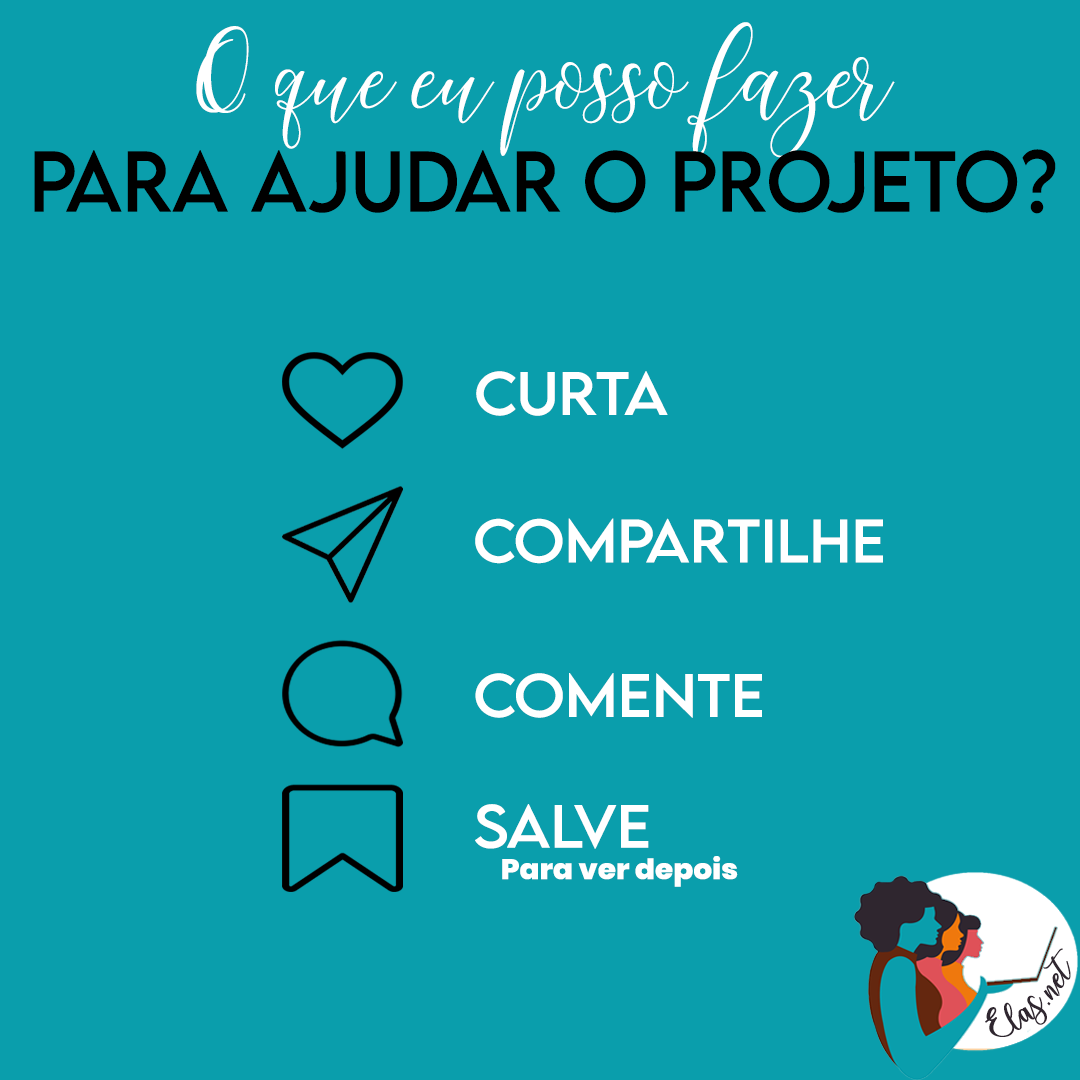
<style>
.page{position:relative;width:1080px;height:1080px;background:#0a9eac}
.page>*{position:absolute;margin:0}
.t1{font:76.3px "LEMONMILK-Regular";color:#000000;scale:0.97 1}
.t2{font:127.9px "MaheisaScript";color:#ffffff;scale:0.97 1}
.t3{font:54.3px "LEMONMILK-Regular";color:#ffffff;scale:1.06 1}
.t4{font:28px "Poppins-ExtraBold";color:#ffffff;scale:1.06 1}
.t5{font:25px "charlinda-Regular";color:#2f262f;scale:1.18 1}
</style>
<div class="page">
<p class="t1" style="left:34px;top:22px;width:1022px;height:192px;text-align:center"><span class="t2">O que eu posso fazer<br></span>Para ajudar o projeto?</p>
<p class="t3" style="left:476px;top:371px;width:192px;height:45px">Curta</p>
<p class="t3" style="left:475px;top:518px;width:408px;height:46px">Compartilhe</p>
<p class="t3" style="left:475px;top:673px;width:287px;height:45px">comente</p>
<p class="t3" style="left:475px;top:804px;width:174px;height:45px">Salve</p>
<p class="t4" style="left:502px;top:856px;width:236px;height:31px">Para ver depois</p>
<p class="t5" style="left:985px;top:948px;width:86px;height:89px;rotate:-43deg">Elas.net</p>
</div>
